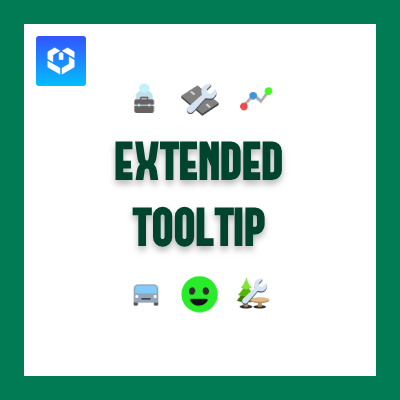
<style>
.page{position:relative;width:400px;height:400px;background:#ffffff}
.page>*{position:absolute;margin:0}
.t1{font:55px "FORQUE";color:#00442e}
</style>
<div class="page">
<p class="t1" style="left:115px;top:141px;width:167px;height:106px;text-align:center">EXTENDED<br>TOOLTIP</p>
</div>
